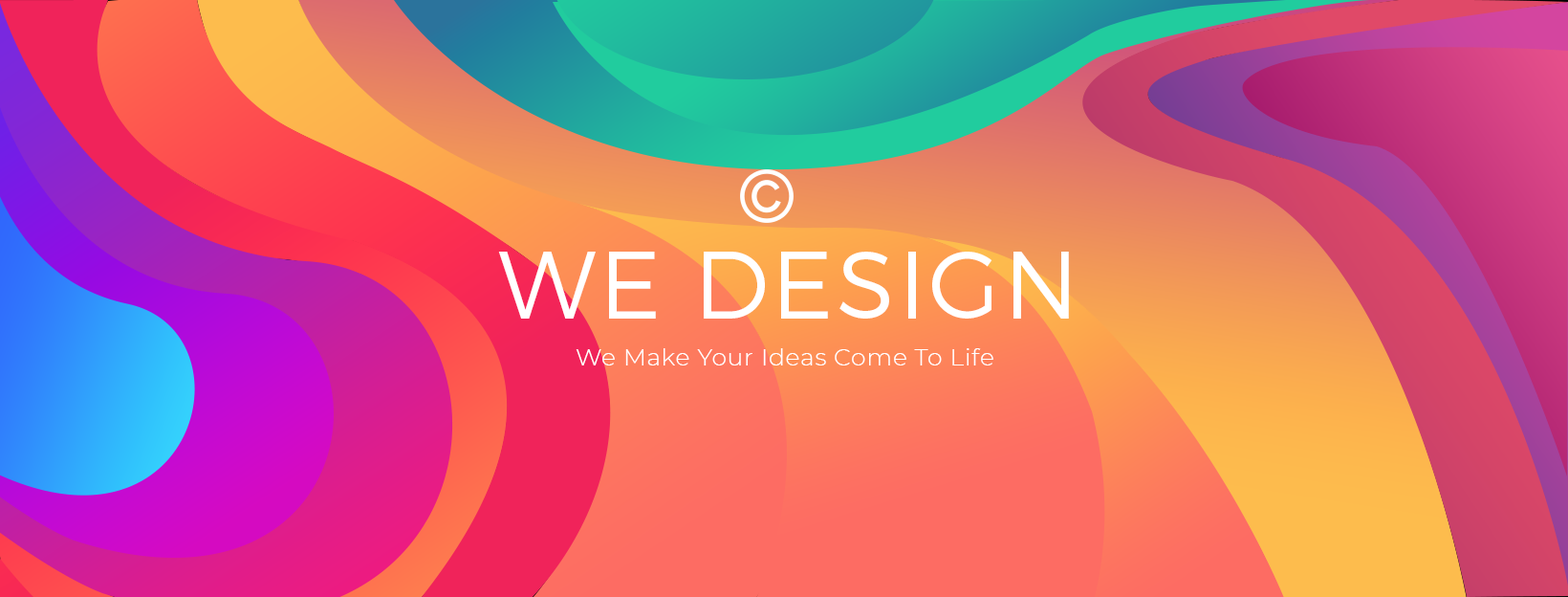
<style>
.page{position:relative;width:1568px;height:597px}
.page>*{position:absolute;margin:0}
.t1{font:95.6px "Montserrat-Light";letter-spacing:0.03em;color:#ffffff;text-transform:uppercase}
.t2{font:23.9px "Montserrat-Light";letter-spacing:0.03em;color:#ffffff}
</style>
<div class="page">
<p class="t1" style="left:498px;top:251px;width:571px;height:67px">We Design</p>
<p class="t2" style="left:576px;top:348px;width:417px;height:17px">We Make Your Ideas Come To Life</p>
</div>
